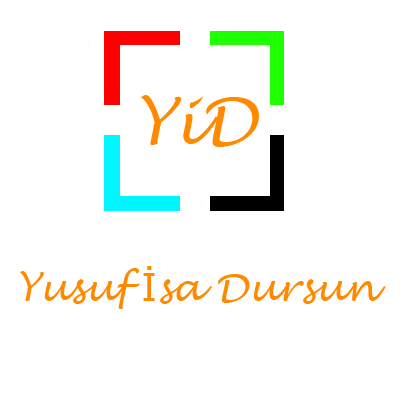
<style>
.page{position:relative;width:400px;height:400px;background:#ffffff}
.page>*{position:absolute;margin:0}
.t1{font:63.5px "LucidaHandwriting-Italic";color:#ff8a00}
.t2{font:38.1px "LucidaHandwriting-Italic";color:#ff8a00}
.t3{font:38.1px "Tahoma";color:#ff8a00}
</style>
<div class="page">
<p class="t1" style="left:140px;top:95px;width:119px;height:52px">YiD</p>
<p class="t2" style="left:20px;top:266px;width:366px;height:43px">Yusuf <span class="t3">İ</span>sa Dursun</p>
</div>
